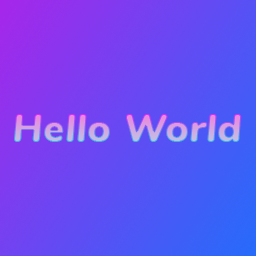
<style>
.page{position:relative;width:256px;height:256px}
.page>*{position:absolute;margin:0}
.t1{font:40px "Nunito-BlackItalic"}
</style>
<div class="page">
<p class="t1" style="left:14px;top:114px;width:228px;height:28px">Hello World</p>
</div>
